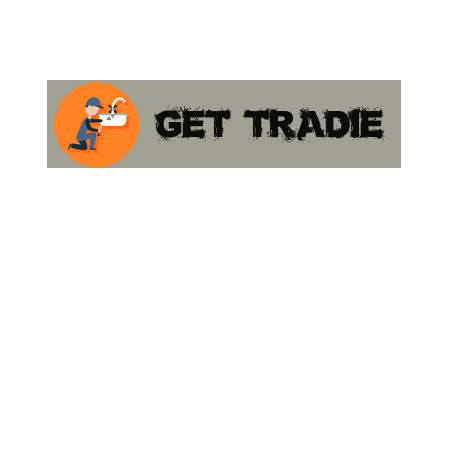
<style>
.page{position:relative;width:450px;height:470px;background:#ffffff}
.page>*{position:absolute;margin:0}
.t1{font:33.3px "BronxBystreets";color:#0d0d07}
.t2{font:25px "BronxBystreets";color:#0d0d07}
</style>
<div class="page">
<p class="t1" style="left:153px;top:105px;width:232px;height:38px"><span class="t2"><br></span>GET TRADIE</p>
</div>
